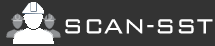
<style>
.page{position:relative;width:215px;height:46px;background:#333333}
.page>*{position:absolute;margin:0}
.t1{font:27px "BankGothicBT-Light";color:#ffffff;text-transform:uppercase}
</style>
<div class="page">
<p class="t1" style="left:65px;top:19px;width:148px;height:15px">SCAN-SST</p>
</div>
